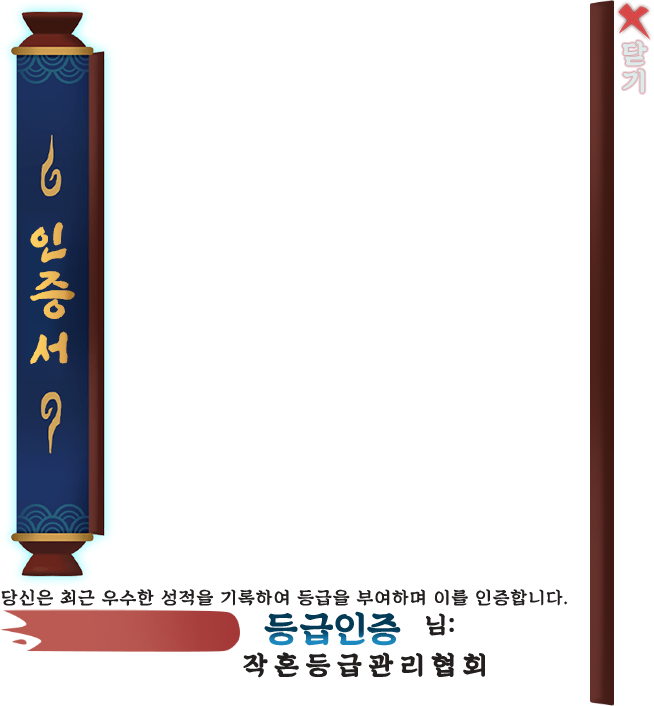
<style>
.page{position:relative;width:654px;height:706px;background:#ffffff}
.page>*{position:absolute;margin:0}
.t1{font:26.4px/50px "SDKukdetopokki-aLt";color:#ddebeb;font-weight:bold}
.t2{font:50px/52.8px "SangSangRock";letter-spacing:0.06em;color:#ecb958;font-weight:bold}
.t3{font:18.1px "SDKukdetopokki-aLt";letter-spacing:0.06em;color:#231f1f}
.t4{font:36.1px "SDKukdetopokki-aLt";letter-spacing:0.06em;font-weight:bold}
.t5{font:23.6px "SDKukdetopokki-aLt";letter-spacing:0.06em;color:#231f1f;font-weight:bold}
.t6{font:26.4px "SDKukdetopokki-aLt";letter-spacing:0.24em;color:#231f1f;font-weight:bold}
</style>
<div class="page">
<p class="t1" style="left:622px;top:41px;width:25px;height:52px">닫기</p>
<p class="t2" style="left:30px;top:222px;width:45px;height:142px">인<br>증<br>서</p>
<p class="t3" style="left:1px;top:589px;width:567px;height:17px">당신은 최근 우수한 성적을 기록하여 등급을 부여하며 이를 인증합니다.</p>
<p class="t4" style="left:264px;top:611px;width:137px;height:35px">등급인증</p>
<p class="t5" style="left:426px;top:613px;width:28px;height:23px">님:</p>
<p class="t6" style="left:243px;top:652px;width:242px;height:26px">작혼등급관리협회</p>
</div>
